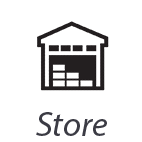
<style>
.page{position:relative;width:142px;height:142px;background:#ffffff}
.page>*{position:absolute;margin:0}
.t1{font:35px "MyriadPro-It";color:#3b3b44}
</style>
<div class="page">
<p class="t1" style="left:36px;top:112px;width:71px;height:24px">Store</p>
</div>
